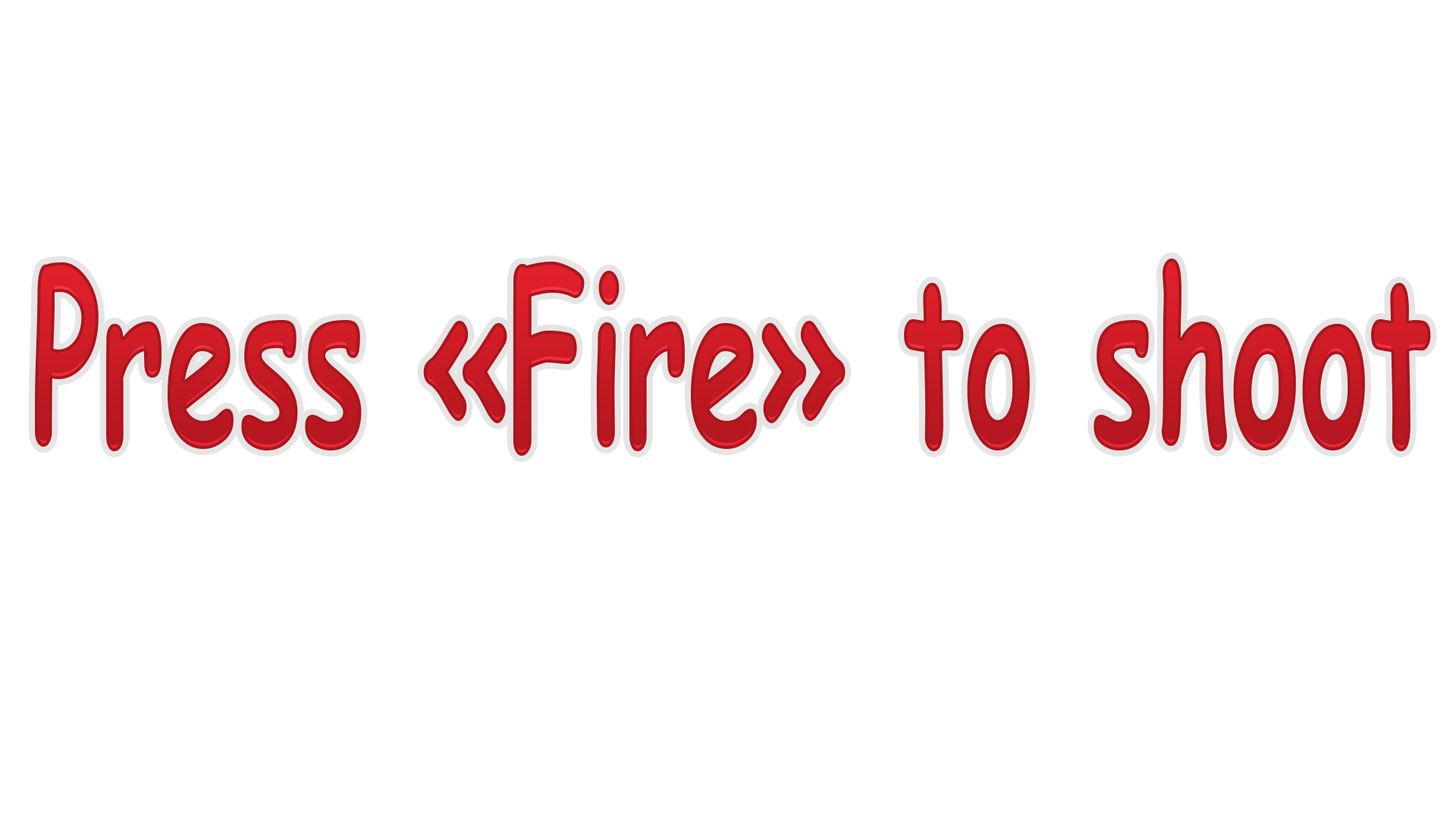
<style>
.page{position:relative;width:1456px;height:819px;background:#ffffff}
.page>*{position:absolute;margin:0}
.t1{font:236.3px "ComicSansMS-Bold";scale:0.56 1}
</style>
<div class="page">
<p class="t1" style="left:35px;top:259px;width:1396px;height:197px">Press «Fire» to shoot</p>
</div>
